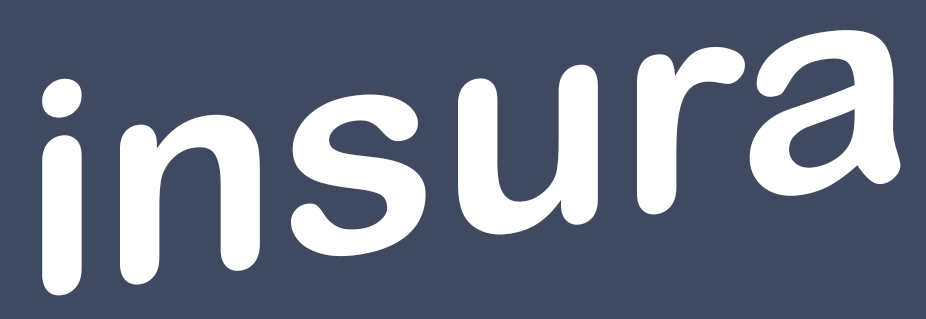
<style>
.page{position:relative;width:926px;height:319px;background:#3f4960}
.page>*{position:absolute;margin:0}
.t1{font:294.3px "ArialRoundedMTBold";color:#ffffff}
</style>
<div class="page">
<p class="t1" style="left:42px;top:30px;width:859px;height:266px;rotate:-8deg">insura</p>
</div>
